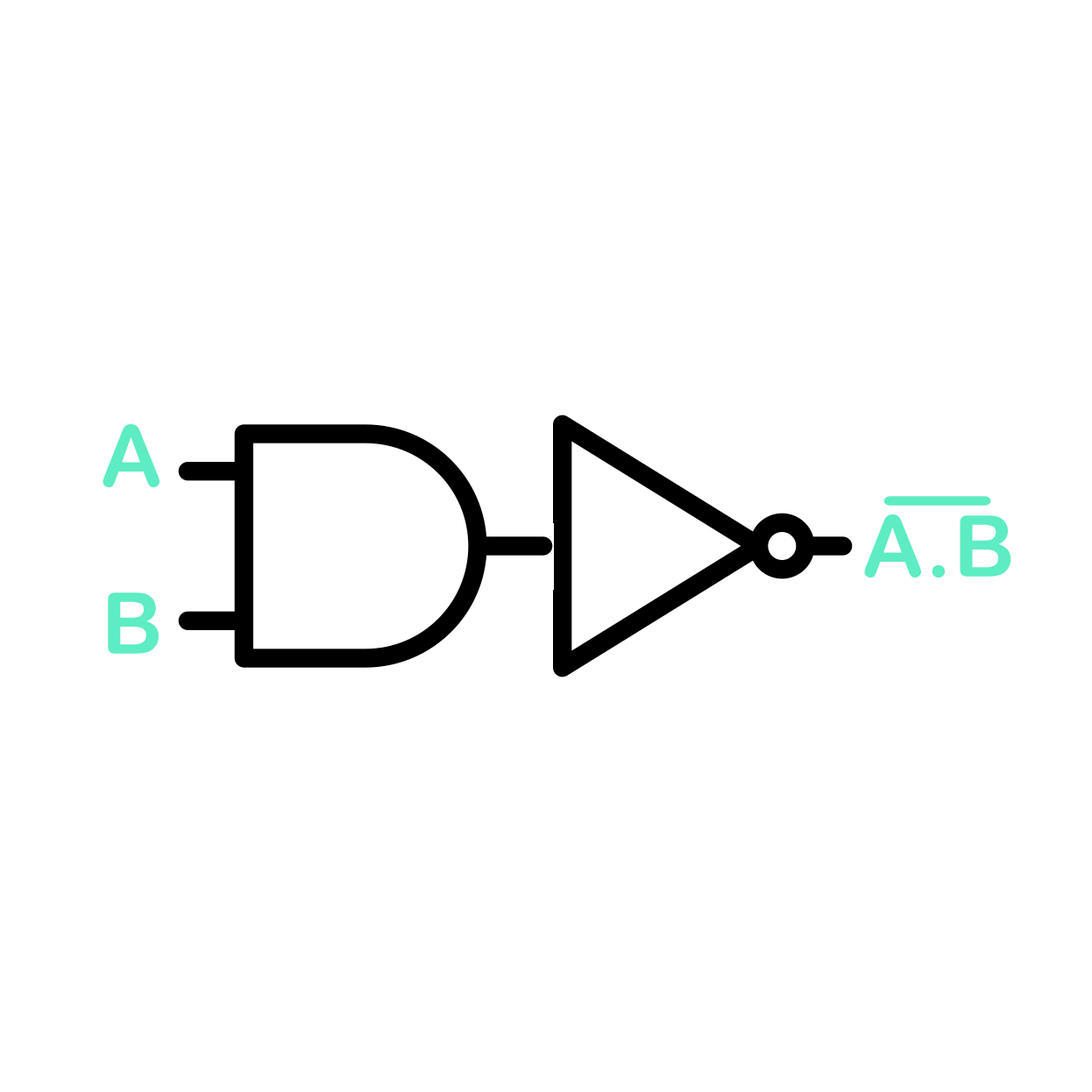
<style>
.page{position:relative;width:1092px;height:1092px;background:#ffffff}
.page>*{position:absolute;margin:0}
.t1{font:85.3px "ArialRoundedMTBold";letter-spacing:0.02em;color:#5decc3}
.t2{font:113.3px "ArialRoundedMTBold";letter-spacing:0.02em;color:#5decc3;scale:0.75 1}
</style>
<div class="page">
<p class="t1" style="left:103px;top:424px;width:57px;height:63px">A</p>
<p class="t2" style="left:884px;top:496px;width:107px;height:10px;rotate:90deg">|</p>
<p class="t1" style="left:108px;top:592px;width:51px;height:62px">B</p>
</div>
